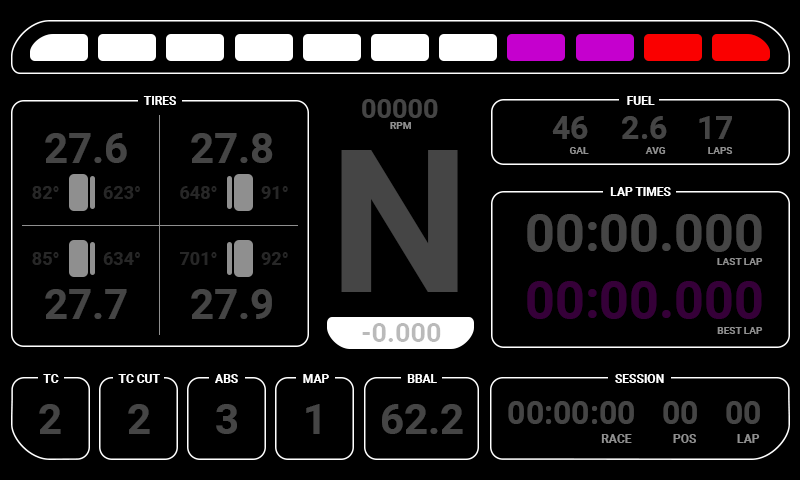
<style>
.page{position:relative;width:800px;height:480px;background:#000000}
.page>*{position:absolute;margin:0}
.t1{font:12px "Roboto-Bold";color:#ffffff}
.t2{font:27px "Roboto-Bold";color:#454545}
.t3{font:10px "Roboto-Bold";color:#8f8f8f}
.t4{font:32px "Roboto-Bold";color:#454545}
.t5{font:42px "Roboto-Bold";color:#454545}
.t6{font:200px "Roboto-Bold";color:#454545}
.t7{font:18px "Roboto-Bold";color:#272727}
.t8{font:52px "Roboto-Bold";color:#454545}
.t9{font:52px "Roboto-Bold";color:#350038}
.t10{font:27px "Roboto-Bold";color:#bababa}
.t11{font:12px "Roboto-Bold";color:#8f8f8f}
</style>
<div class="page">
<p class="t1" style="left:143px;top:96px;width:33px;height:9px">TIRES</p>
<p class="t2" style="left:362px;top:99px;width:76px;height:19px">00000</p>
<p class="t1" style="left:627px;top:96px;width:28px;height:9px">FUEL</p>
<p class="t3" style="left:390px;top:122px;width:21px;height:7px">RPM</p>
<p class="t4" style="left:552px;top:116px;width:36px;height:23px">46</p>
<p class="t4" style="left:622px;top:116px;width:45px;height:23px">2.6</p>
<p class="t4" style="left:699px;top:116px;width:33px;height:23px">17</p>
<p class="t5" style="left:45px;top:133px;width:82px;height:30px">27.6</p>
<p class="t5" style="left:191px;top:133px;width:82px;height:30px">27.8</p>
<p class="t6" style="left:341px;top:150px;width:117px;height:142px">N</p>
<p class="t3" style="left:569px;top:147px;width:20px;height:7px">GAL</p>
<p class="t3" style="left:645px;top:147px;width:21px;height:7px">AVG</p>
<p class="t3" style="left:708px;top:147px;width:25px;height:7px">LAPS</p>
<p class="t7" style="left:32px;top:186px;width:27px;height:13px">82°</p>
<p class="t7" style="left:103px;top:186px;width:37px;height:13px">623°</p>
<p class="t7" style="left:180px;top:186px;width:37px;height:13px">648°</p>
<p class="t7" style="left:261px;top:186px;width:27px;height:13px">91°</p>
<p class="t1" style="left:610px;top:187px;width:61px;height:9px">LAP TIMES</p>
<p class="t8" style="left:527px;top:214px;width:235px;height:38px">00:00.000</p>
<p class="t7" style="left:32px;top:252px;width:27px;height:13px">85°</p>
<p class="t7" style="left:103px;top:252px;width:37px;height:13px">634°</p>
<p class="t7" style="left:180px;top:252px;width:37px;height:13px">701°</p>
<p class="t7" style="left:261px;top:252px;width:27px;height:13px">92°</p>
<p class="t3" style="left:717px;top:258px;width:46px;height:7px">LAST LAP</p>
<p class="t9" style="left:527px;top:281px;width:235px;height:38px">00:00.000</p>
<p class="t5" style="left:45px;top:289px;width:82px;height:30px">27.7</p>
<p class="t5" style="left:191px;top:289px;width:81px;height:30px">27.9</p>
<p class="t10" style="left:362px;top:323px;width:79px;height:19px">-0.000</p>
<p class="t3" style="left:717px;top:327px;width:46px;height:7px">BEST LAP</p>
<p class="t1" style="left:43px;top:374px;width:16px;height:9px">TC</p>
<p class="t1" style="left:118px;top:374px;width:42px;height:9px">TC CUT</p>
<p class="t1" style="left:215px;top:374px;width:23px;height:9px">ABS</p>
<p class="t1" style="left:303px;top:374px;width:26px;height:9px">MAP</p>
<p class="t1" style="left:407px;top:374px;width:30px;height:9px">BBAL</p>
<p class="t1" style="left:615px;top:374px;width:49px;height:9px">SESSION</p>
<p class="t4" style="left:508px;top:401px;width:126px;height:23px">00:00:00</p>
<p class="t4" style="left:663px;top:401px;width:34px;height:23px">00</p>
<p class="t4" style="left:726px;top:401px;width:34px;height:23px">00</p>
<p class="t5" style="left:39px;top:404px;width:22px;height:30px">2</p>
<p class="t5" style="left:128px;top:404px;width:22px;height:30px">2</p>
<p class="t5" style="left:216px;top:404px;width:21px;height:30px">3</p>
<p class="t5" style="left:306px;top:404px;width:14px;height:30px">1</p>
<p class="t5" style="left:382px;top:404px;width:81px;height:30px">62.2</p>
<p class="t11" style="left:601px;top:434px;width:31px;height:9px">RACE</p>
<p class="t11" style="left:673px;top:434px;width:23px;height:9px">POS</p>
<p class="t11" style="left:737px;top:434px;width:23px;height:9px">LAP</p>
</div>
